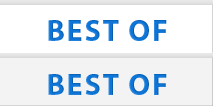
<style>
.page{position:relative;width:213px;height:106px;background:#ffffff}
.page>*{position:absolute;margin:0}
.t1{font:30px "MyriadPro-Bold";letter-spacing:0.06em;color:#0d75d7}
</style>
<div class="page">
<p class="t1" style="left:48px;top:20px;width:119px;height:21px">BEST OF</p>
<p class="t1" style="left:48px;top:74px;width:119px;height:21px">BEST OF</p>
</div>
